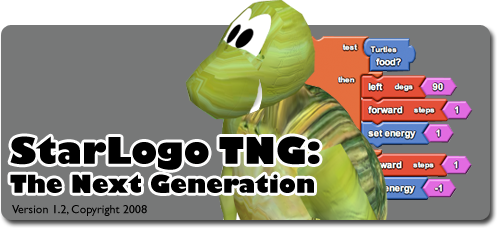
<style>
.page{position:relative;width:497px;height:228px;background:#777878}
.page>*{position:absolute;margin:0}
.t1{font:24px "GillSans-UltraBold";color:#000000}
.t2{font:36px "GillSans-UltraBold";color:#000000}
.t3{font:12px "GillSans";color:#000000}
</style>
<div class="page">
<p class="t1" style="left:10px;top:136px;width:310px;height:57px"><span class="t2">StarLogo TNG:<br></span>The Next Generation</p>
<p class="t3" style="left:12px;top:205px;width:135px;height:11px">Version 1.2, Copyright 2008</p>
</div>
